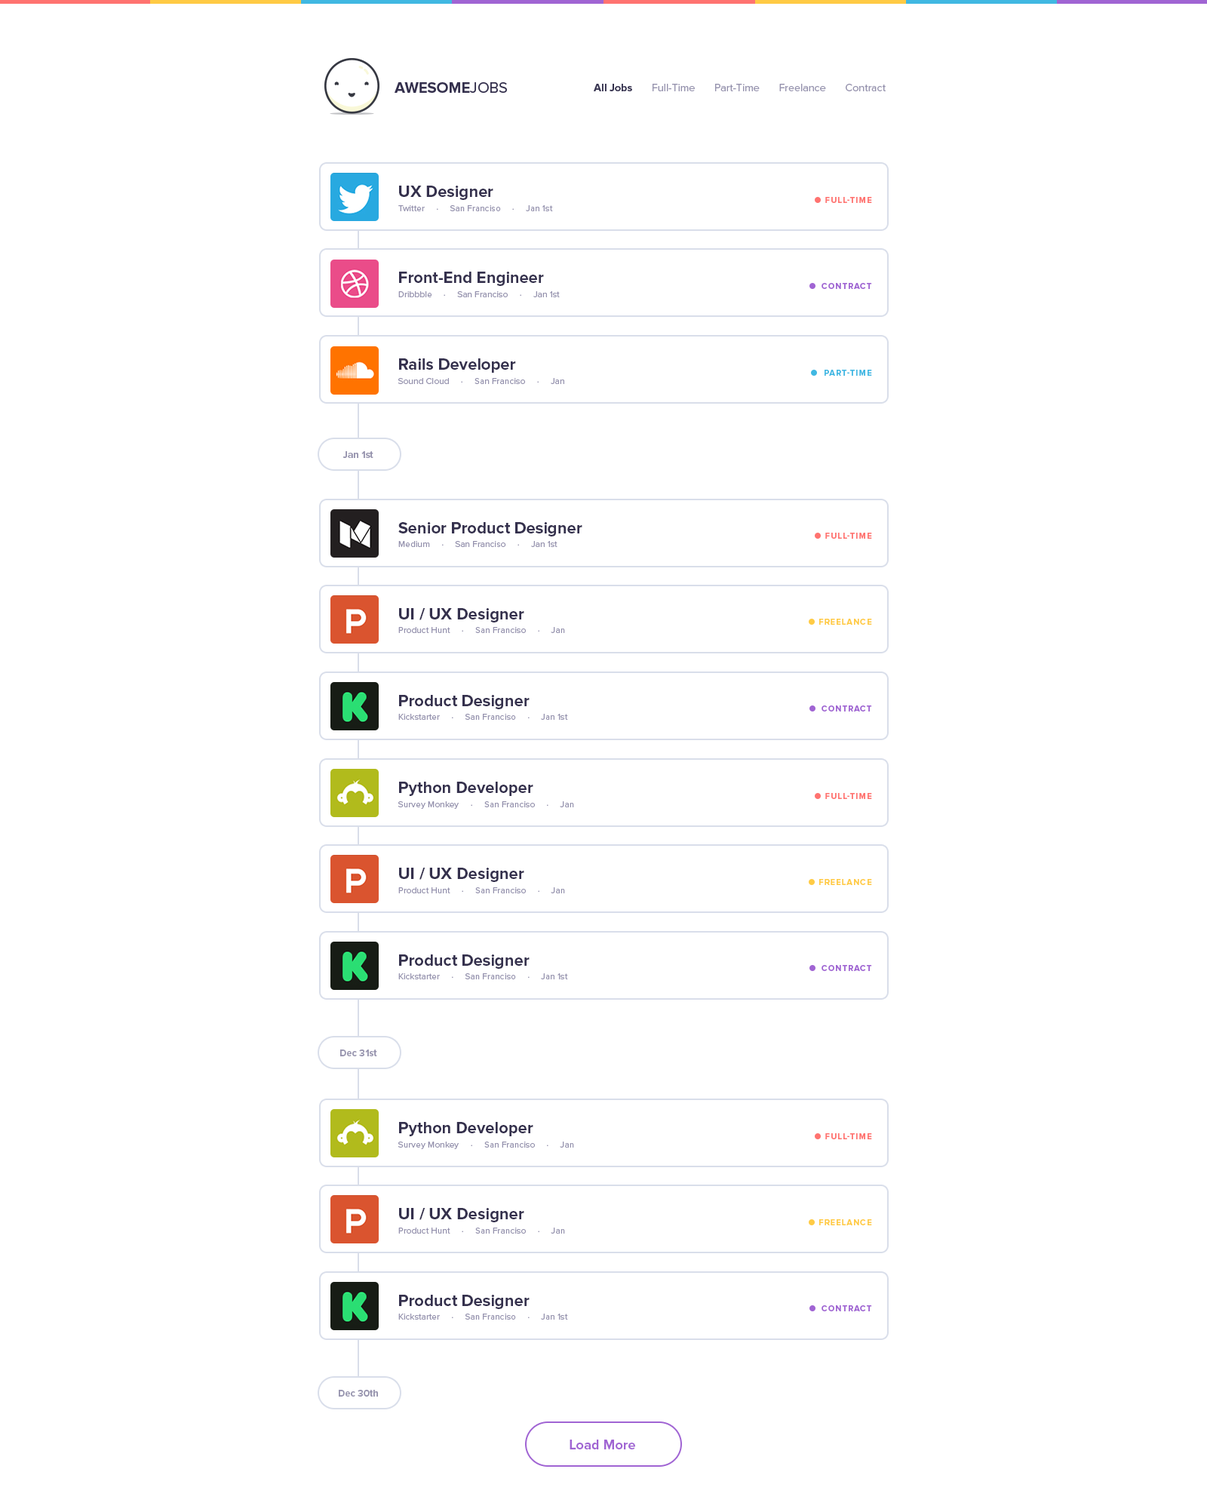
<style>
.page{position:relative;width:1207px;height:1509px;background:#ffffff}
.page>*{position:absolute;margin:0}
.t1{font:15.4px "ProximaNova-Bold";color:#34304d;text-transform:uppercase}
.t2{font:15.4px "ProximaNova-Regular";color:#34304d;text-transform:uppercase}
.t3{font:10.8px "ProximaNova-Regular";color:#9592ad}
.t4{font:10.8px "ProximaNova-Bold";color:#34314d}
.t5{font:16.6px "ProximaNova-Bold";color:#34304d}
.t6{font:8.3px "ProximaNova-Bold";letter-spacing:0.1em;color:#ff7370;text-transform:uppercase}
.t7{font:9px "ProximaNova-Regular";color:#9592ae}
.t8{font:8.3px "ProximaNova-Bold";letter-spacing:0.1em;color:#a064d3;text-transform:uppercase}
.t9{font:8.3px "ProximaNova-Bold";letter-spacing:0.1em;color:#40b8e3;text-transform:uppercase}
.t10{font:9.8px "ProximaNova-Bold";color:#9592ad}
.t11{font:8.3px "ProximaNova-Bold";letter-spacing:0.1em;color:#ffcb45;text-transform:uppercase}
.t12{font:13.7px "ProximaNova-Bold";color:#a064d3}
</style>
<div class="page">
<p class="t1" style="left:395px;top:82px;width:112px;height:11px">Awesome<span class="t2">Jobs</span></p>
<p class="t3" style="left:594px;top:84px;width:292px;height:7px"><span class="t4">All Jobs</span>       Full-Time       Part-Time       Freelance       Contract</p>
<p class="t5" style="left:399px;top:186px;width:94px;height:14px">UX Designer</p>
<p class="t6" style="left:825px;top:197px;width:47px;height:6px">Full-Time</p>
<p class="t7" style="left:398px;top:205px;width:155px;height:6px">Twitter     ·     San Franciso     ·     Jan 1st</p>
<p class="t5" style="left:399px;top:272px;width:145px;height:14px">Front-End Engineer</p>
<p class="t7" style="left:398px;top:291px;width:162px;height:6px">Dribbble     ·     San Franciso     ·     Jan 1st</p>
<p class="t8" style="left:822px;top:283px;width:50px;height:6px">Contract</p>
<p class="t5" style="left:399px;top:358px;width:117px;height:15px">Rails Developer</p>
<p class="t9" style="left:825px;top:370px;width:47px;height:6px">Part-TIME</p>
<p class="t7" style="left:398px;top:378px;width:166px;height:6px">Sound Cloud     ·     San Franciso     ·     Jan 1st</p>
<p class="t10" style="left:343px;top:451px;width:31px;height:7px">Jan 1st</p>
<p class="t5" style="left:398px;top:522px;width:185px;height:14px">Senior Product Designer</p>
<p class="t6" style="left:825px;top:533px;width:47px;height:6px">Full-Time</p>
<p class="t7" style="left:398px;top:541px;width:160px;height:6px">Medium     ·     San Franciso     ·     Jan 1st</p>
<p class="t5" style="left:399px;top:608px;width:125px;height:15px">UI / UX Designer</p>
<p class="t7" style="left:398px;top:627px;width:167px;height:6px">Product Hunt     ·     San Franciso     ·     Jan 1st</p>
<p class="t11" style="left:819px;top:619px;width:53px;height:6px">Freelance</p>
<p class="t5" style="left:399px;top:695px;width:131px;height:14px">Product Designer</p>
<p class="t7" style="left:398px;top:714px;width:170px;height:6px">Kickstarter     ·     San Franciso     ·     Jan 1st</p>
<p class="t8" style="left:822px;top:706px;width:50px;height:6px">Contract</p>
<p class="t5" style="left:399px;top:782px;width:134px;height:14px">Python Developer</p>
<p class="t6" style="left:825px;top:793px;width:47px;height:6px">Full-Time</p>
<p class="t7" style="left:398px;top:801px;width:176px;height:8px">Survey Monkey     ·     San Franciso     ·     Jan 1st</p>
<p class="t5" style="left:399px;top:868px;width:125px;height:14px">UI / UX Designer</p>
<p class="t11" style="left:819px;top:879px;width:53px;height:6px">Freelance</p>
<p class="t7" style="left:398px;top:887px;width:167px;height:6px">Product Hunt     ·     San Franciso     ·     Jan 1st</p>
<p class="t5" style="left:399px;top:955px;width:131px;height:14px">Product Designer</p>
<p class="t8" style="left:822px;top:965px;width:50px;height:6px">Contract</p>
<p class="t7" style="left:398px;top:973px;width:170px;height:6px">Kickstarter     ·     San Franciso     ·     Jan 1st</p>
<p class="t10" style="left:340px;top:1050px;width:37px;height:6px">Dec 31st</p>
<p class="t5" style="left:399px;top:1122px;width:134px;height:14px">Python Developer</p>
<p class="t6" style="left:825px;top:1133px;width:47px;height:6px">Full-Time</p>
<p class="t7" style="left:398px;top:1142px;width:176px;height:7px">Survey Monkey     ·     San Franciso     ·     Jan 1st</p>
<p class="t5" style="left:399px;top:1208px;width:125px;height:14px">UI / UX Designer</p>
<p class="t7" style="left:398px;top:1228px;width:167px;height:6px">Product Hunt     ·     San Franciso     ·     Jan 1st</p>
<p class="t11" style="left:819px;top:1219px;width:53px;height:6px">Freelance</p>
<p class="t5" style="left:399px;top:1295px;width:131px;height:14px">Product Designer</p>
<p class="t7" style="left:398px;top:1314px;width:170px;height:6px">Kickstarter     ·     San Franciso     ·     Jan 1st</p>
<p class="t8" style="left:822px;top:1305px;width:50px;height:6px">Contract</p>
<p class="t10" style="left:339px;top:1390px;width:39px;height:7px">Dec 30th</p>
<p class="t12" style="left:570px;top:1440px;width:65px;height:9px">Load More</p>
</div>
